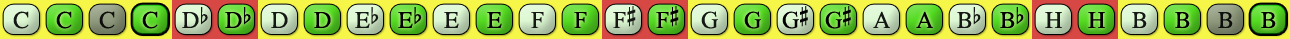
<style>
.page{position:relative;width:1290px;height:39px}
.page>*{position:absolute;margin:0}
.t1{font:24px "OpusChords";color:#000000}
.t2{font:24px "OpusChords";letter-spacing:-0.025em;color:#000000}
</style>
<div class="page">
<p class="t1" style="left:613px;top:6px;width:23px;height:22px;opacity:0.9">F#</p>
<p class="t1" style="left:656px;top:6px;width:23px;height:22px">F#</p>
<p class="t2" style="left:782px;top:6px;width:26px;height:23px">G#</p>
<p class="t2" style="left:825px;top:6px;width:26px;height:23px">G#</p>
<p class="t1" style="left:13px;top:11px;width:16px;height:18px;opacity:0.9">C</p>
<p class="t1" style="left:56px;top:11px;width:16px;height:18px">C</p>
<p class="t1" style="left:99px;top:11px;width:16px;height:18px;opacity:0.9">C</p>
<p class="t1" style="left:142px;top:11px;width:16px;height:18px">C</p>
<p class="t1" style="left:182px;top:7px;width:26px;height:21px;opacity:0.9">Db</p>
<p class="t1" style="left:225px;top:7px;width:26px;height:21px">Db</p>
<p class="t1" style="left:271px;top:12px;width:17px;height:16px;opacity:0.9">D</p>
<p class="t1" style="left:314px;top:12px;width:17px;height:16px">D</p>
<p class="t1" style="left:355px;top:7px;width:24px;height:21px;opacity:0.9">Eb</p>
<p class="t1" style="left:398px;top:7px;width:24px;height:21px">Eb</p>
<p class="t1" style="left:444px;top:12px;width:15px;height:16px;opacity:0.9">E</p>
<p class="t1" style="left:487px;top:12px;width:15px;height:16px">E</p>
<p class="t1" style="left:531px;top:12px;width:13px;height:16px;opacity:0.9">F</p>
<p class="t1" style="left:574px;top:12px;width:13px;height:16px">F</p>
<p class="t1" style="left:701px;top:11px;width:17px;height:18px;opacity:0.9">G</p>
<p class="t1" style="left:744px;top:11px;width:17px;height:18px">G</p>
<p class="t1" style="left:873px;top:11px;width:17px;height:17px;opacity:0.9">A</p>
<p class="t1" style="left:916px;top:11px;width:17px;height:17px">A</p>
<p class="t1" style="left:957px;top:7px;width:24px;height:21px;opacity:0.9">Bb</p>
<p class="t1" style="left:1000px;top:7px;width:24px;height:21px">Bb</p>
<p class="t1" style="left:1045px;top:12px;width:17px;height:16px;opacity:0.9">H</p>
<p class="t1" style="left:1088px;top:12px;width:17px;height:16px">H</p>
<p class="t1" style="left:1132px;top:12px;width:15px;height:16px;opacity:0.9">B</p>
<p class="t1" style="left:1175px;top:12px;width:15px;height:16px">B</p>
<p class="t1" style="left:1218px;top:12px;width:15px;height:16px;opacity:0.9">B</p>
<p class="t1" style="left:1261px;top:12px;width:15px;height:16px">B</p>
</div>
